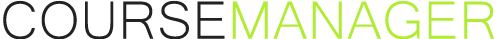
<style>
.page{position:relative;width:498px;height:39px;background:#ffffff}
.page>*{position:absolute;margin:0}
.t1{font:69px "Microsoft-Yi-Baiti";letter-spacing:0.01em;color:#b1eb34;text-transform:uppercase}
.t2{font:69px "Microsoft-Yi-Baiti";letter-spacing:0.01em;color:#222222;text-transform:uppercase}
</style>
<div class="page">
<p class="t1" style="left:3px;top:0px;width:491px;height:39px"><span class="t2">COURSE</span>MANAGER</p>
</div>
